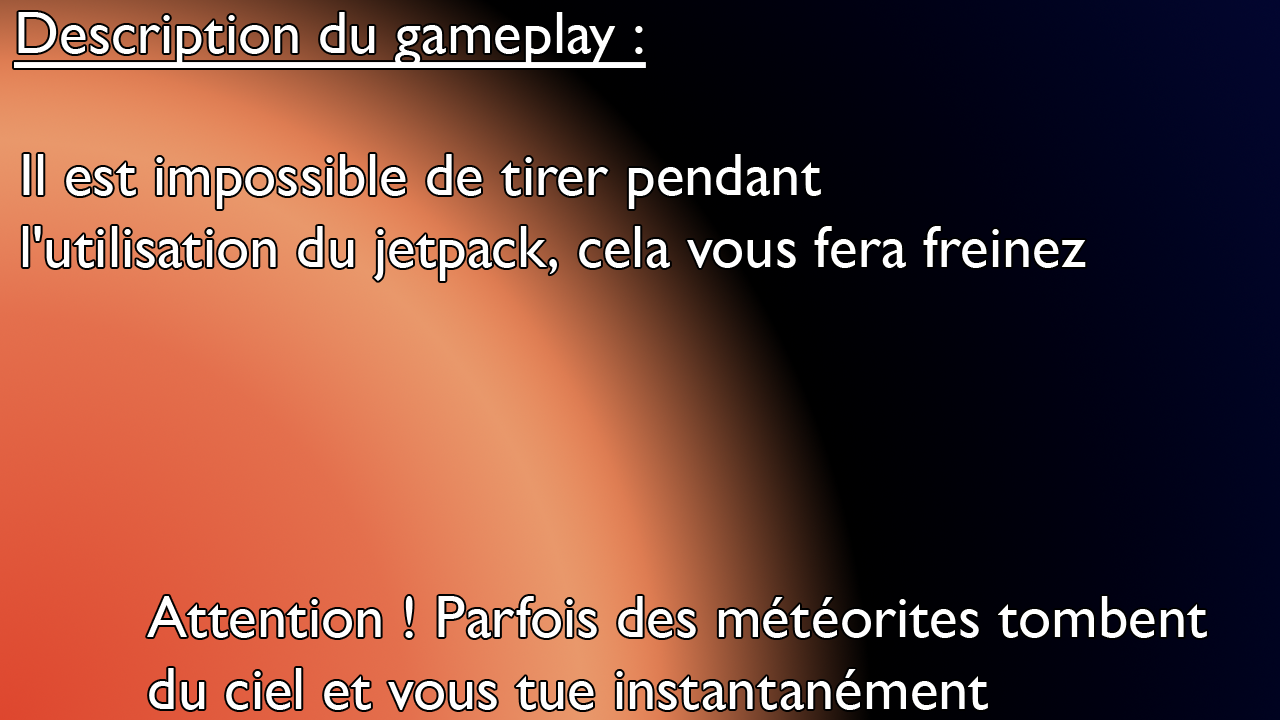
<style>
.page{position:relative;width:1280px;height:720px}
.page>*{position:absolute;margin:0}
.t1{font:60px "GillSansNova";color:#ffffff;text-decoration:underline}
.t2{font:60px "GillSansNova";color:#ffffff}
</style>
<div class="page">
<p class="t1" style="left:14px;top:12px;width:632px;height:56px">Description du gameplay :</p>
<p class="t2" style="left:22px;top:154px;width:1064px;height:127px">Il est impossible de tirer pendant<br>l'utilisation du jetpack, cela vous fera freinez</p>
<p class="t2" style="left:147px;top:596px;width:1060px;height:114px">Attention ! Parfois des météorites tombent<br>du ciel et vous tue instantanément</p>
</div>
